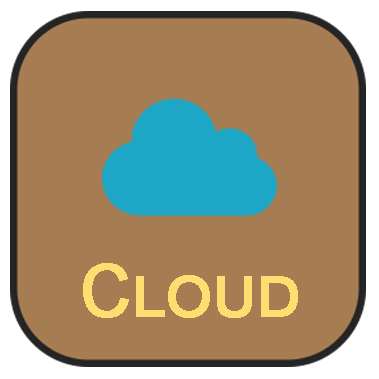
<style>
.page{position:relative;width:379px;height:379px;background:#a67c52}
.page>*{position:absolute;margin:0}
.t1{font:71.9px "ArialMT";letter-spacing:-0.025em;color:#fede70;font-variant:small-caps;font-weight:bold}
</style>
<div class="page">
<p class="t1" style="left:83px;top:263px;width:215px;height:55px">Cloud</p>
</div>
